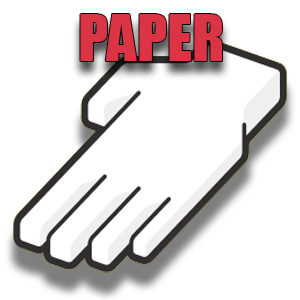
<style>
.page{position:relative;width:300px;height:300px;background:#ffffff}
.page>*{position:absolute;margin:0}
.t1{font:60px "Impact";color:#dc3545}
</style>
<div class="page">
<p class="t1" style="left:80px;top:14px;width:142px;height:47px">PAPER</p>
</div>
